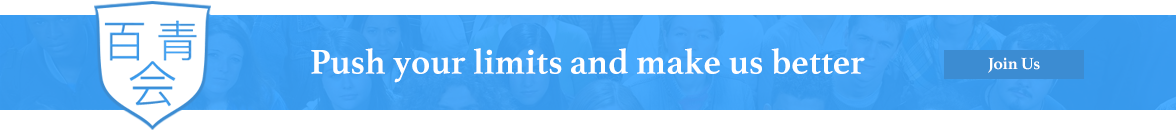
<style>
.page{position:relative;width:1176px;height:130px;background:#ffffff}
.page>*{position:absolute;margin:0}
.t1{font:35.9px "Athelas-Bold";color:#ffffff}
.t2{font:17px "Athelas-Bold";color:#ffffff}
</style>
<div class="page">
<p class="t1" style="left:311px;top:48px;width:554px;height:35px">Push your limits and make us better</p>
<p class="t2" style="left:988px;top:57px;width:52px;height:16px">Join Us</p>
</div>
